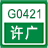
<style>
.page{position:relative;width:48px;height:48px;background:#ffffff}
.page>*{position:absolute;margin:0}
.t1{font:12.7px "ArialMT";letter-spacing:0.04em;color:#06763e;scale:0.87 1}
.t2{font:14.4px "MicrosoftYaHei";letter-spacing:0.18em;color:#ffffff;scale:0.85 1}
</style>
<div class="page">
<p class="t1" style="left:7px;top:9px;width:34px;height:10px">G0421</p>
<p class="t2" style="left:10px;top:25px;width:28px;height:15px">许广</p>
</div>
